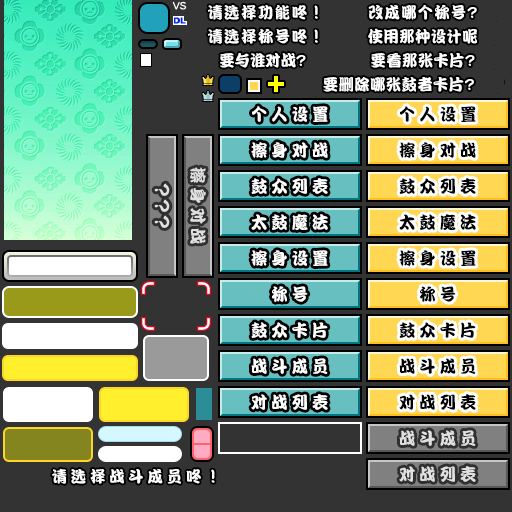
<style>
.page{position:relative;width:512px;height:512px;background:#333333}
.page>*{position:absolute;margin:0}
.t1{font:16px "DFPKanTingLiuW9";letter-spacing:0.1em;color:#ffffff;scale:0.96 1}
.t2{font:16px "DFPKanTingLiuW9";letter-spacing:0.075em;color:#ffffff;scale:0.96 1}
.t3{font:16px "DFPKanTingLiuW9";letter-spacing:0.025em;color:#ffffff;scale:0.96 1}
.t4{font:16px "DFPKanTingLiuW9";color:#ffffff;scale:0.96 1}
.t5{font:17px "DFPKanTingLiuW9";letter-spacing:0.25em;color:#ffffff;scale:0.96 1}
.t6{font:17px "DFPKanTingLiuW9";letter-spacing:0.25em;color:#000000;scale:0.96 1}
.t7{font:17px "DFPKanTingLiuW9";letter-spacing:0.25em;color:#e0e0e0;scale:0.96 1}
.t8{font:16px "DFPKanTingLiuW9";letter-spacing:0.25em;color:#ffffff;scale:0.96 1}
</style>
<div class="page">
<p class="t1" style="left:208px;top:4px;width:110px;height:16px">请选择功能咚！</p>
<p class="t2" style="left:368px;top:5px;width:109px;height:15px">改成哪个称号?</p>
<p class="t1" style="left:208px;top:28px;width:110px;height:16px">请选择称号咚！</p>
<p class="t3" style="left:368px;top:28px;width:109px;height:16px">使用那种设计呢</p>
<p class="t4" style="left:220px;top:53px;width:86px;height:15px">要与谁对战?</p>
<p class="t3" style="left:371px;top:53px;width:104px;height:15px">要看那张卡片?</p>
<p class="t3" style="left:323px;top:77px;width:151px;height:15px">要删除哪张鼓者卡片?</p>
<p class="t5" style="left:252px;top:106px;width:76px;height:16px">个人设置</p>
<p class="t6" style="left:400px;top:106px;width:76px;height:16px">个人设置</p>
<p class="t5" style="left:251px;top:142px;width:77px;height:16px">擦身对战</p>
<p class="t6" style="left:399px;top:142px;width:77px;height:16px">擦身对战</p>
<p class="t7" style="left:190px;top:167px;width:16px;height:77px;rotate:90deg">擦身对战</p>
<p class="t5" style="left:251px;top:178px;width:77px;height:16px">鼓众列表</p>
<p class="t6" style="left:399px;top:178px;width:77px;height:16px">鼓众列表</p>
<p class="t5" style="left:251px;top:214px;width:77px;height:16px">太鼓魔法</p>
<p class="t6" style="left:399px;top:214px;width:77px;height:16px">太鼓魔法</p>
<p class="t5" style="left:251px;top:250px;width:77px;height:16px">擦身设置</p>
<p class="t6" style="left:399px;top:250px;width:77px;height:16px">擦身设置</p>
<p class="t5" style="left:272px;top:286px;width:36px;height:16px">称号</p>
<p class="t6" style="left:420px;top:286px;width:36px;height:16px">称号</p>
<p class="t5" style="left:251px;top:322px;width:77px;height:16px">鼓众卡片</p>
<p class="t6" style="left:399px;top:322px;width:77px;height:16px">鼓众卡片</p>
<p class="t5" style="left:251px;top:358px;width:77px;height:16px">战斗成员</p>
<p class="t6" style="left:399px;top:358px;width:77px;height:16px">战斗成员</p>
<p class="t5" style="left:251px;top:394px;width:77px;height:16px">对战列表</p>
<p class="t6" style="left:399px;top:394px;width:77px;height:16px">对战列表</p>
<p class="t7" style="left:399px;top:430px;width:77px;height:16px">战斗成员</p>
<p class="t8" style="left:52px;top:468px;width:163px;height:16px">请选择战斗成员咚！</p>
<p class="t7" style="left:399px;top:466px;width:77px;height:16px">对战列表</p>
</div>
